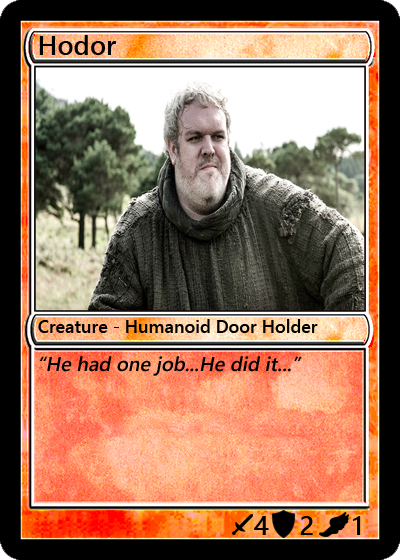
<style>
.page{position:relative;width:400px;height:560px}
.page>*{position:absolute;margin:0}
.t1{font:27px "YuGothicUI-Semibold";color:#000000}
.t2{font:18px "YuGothicUI-Semibold";color:#000000}
.t3{font:20px "YuGothicUI-Semibold";color:#000000;font-style:italic}
</style>
<div class="page">
<p class="t1" style="left:39px;top:35px;width:77px;height:20px">Hodor</p>
<p class="t2" style="left:38px;top:319px;width:280px;height:14px">Creature - Humanoid Door Holder</p>
<p class="t3" style="left:39px;top:356px;width:263px;height:20px">“He had one job...He did it...”</p>
<p class="t1" style="left:254px;top:516px;width:15px;height:19px">4</p>
<p class="t1" style="left:300px;top:516px;width:13px;height:19px">2</p>
<p class="t1" style="left:353px;top:516px;width:8px;height:19px">1</p>
</div>
